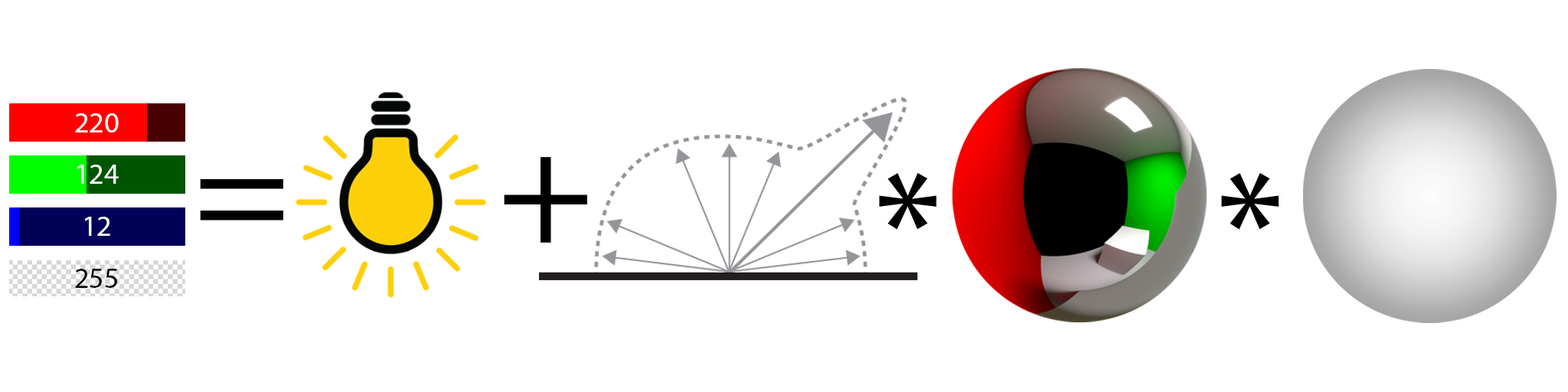
<style>
.page{position:relative;width:1568px;height:392px;background:#ffffff}
.page>*{position:absolute;margin:0}
.t1{font:29.4px "MyriadPro-Regular";color:#ffffff}
.t2{font:160.6px "MyriadPro-Regular";color:#000000}
.t3{font:29.4px "MyriadPro-Regular";color:#000000}
</style>
<div class="page">
<p class="t1" style="left:75px;top:113px;width:44px;height:19px">220</p>
<p class="t2" style="left:504px;top:157px;width:83px;height:86px">+∫{\displaystyle \displaystyle \int }</p>
<p class="t1" style="left:77px;top:165px;width:42px;height:19px">124</p>
<p class="t2" style="left:879px;top:172px;width:57px;height:58px">*</p>
<p class="t2" style="left:1221px;top:172px;width:58px;height:58px">*</p>
<p class="t2" style="left:200px;top:179px;width:83px;height:41px">=</p>
<p class="t1" style="left:85px;top:217px;width:25px;height:19px">12</p>
<p class="t3" style="left:75px;top:269px;width:42px;height:19px">255</p>
</div>
